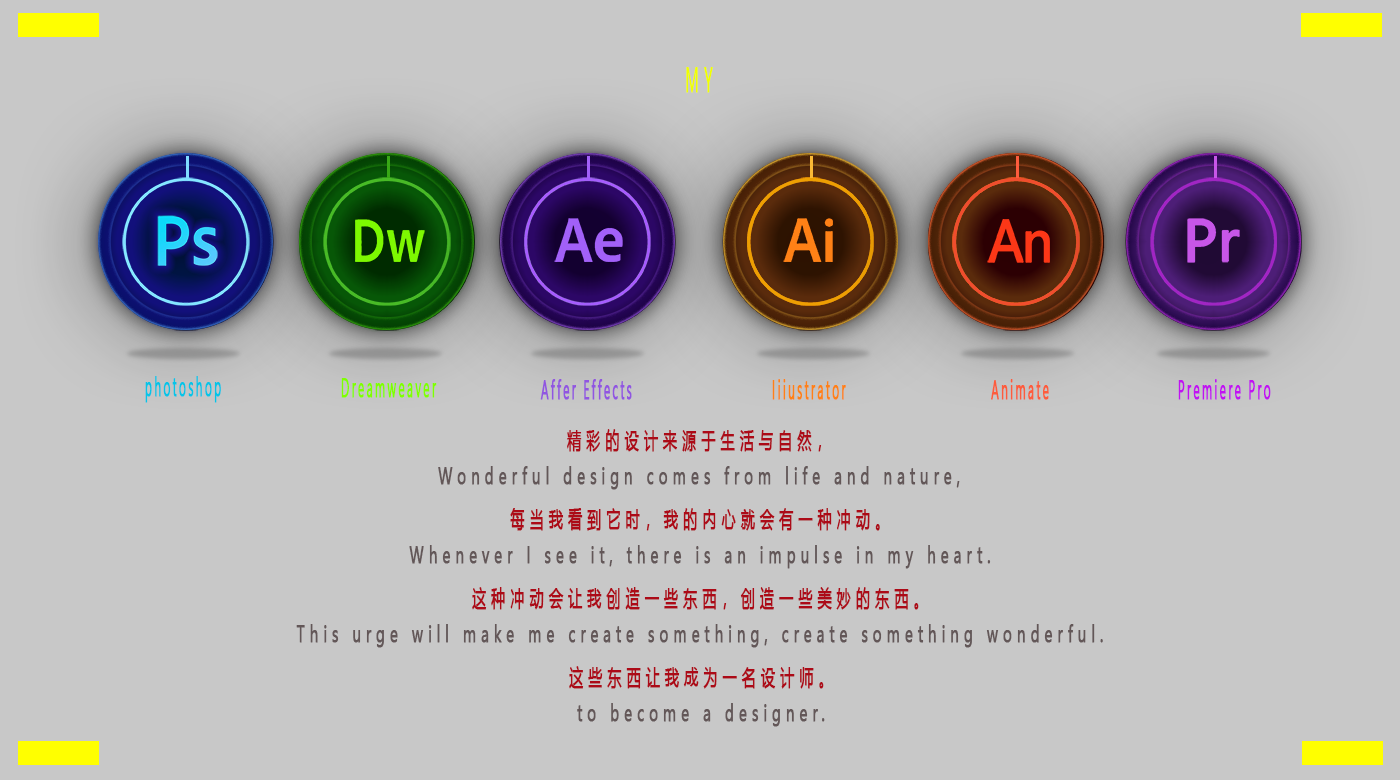
<style>
.page{position:relative;width:1400px;height:780px;background:#c8c8c8}
.page>*{position:absolute;margin:0}
.t1{font:33.3px "MicrosoftYaHei";letter-spacing:0.3em;color:#f0ff00;font-weight:bold;scale:0.43 1}
.t2{font:25px "MicrosoftJhengHeiRegular";letter-spacing:0.2em;color:#07c4e7;font-weight:bold;scale:0.43 1}
.t3{font:25px "MicrosoftJhengHeiRegular";letter-spacing:0.2em;color:#80ff00;font-weight:bold;scale:0.43 1}
.t4{font:25px "MicrosoftJhengHeiRegular";letter-spacing:0.2em;color:#9155e1;font-weight:bold;scale:0.43 1}
.t5{font:25px "MicrosoftJhengHeiRegular";letter-spacing:0.2em;color:#ff8116;font-weight:bold;scale:0.43 1}
.t6{font:25px "MicrosoftJhengHeiRegular";letter-spacing:0.2em;color:#fd5c3d;font-weight:bold;scale:0.43 1}
.t7{font:25px "MicrosoftJhengHeiRegular";letter-spacing:0.2em;color:#c113f1;font-weight:bold;scale:0.43 1}
.t8{font:22px "MicrosoftYaHei";letter-spacing:0.3em;color:#ac0a17;font-weight:bold;scale:0.66 1}
.t9{font:22px "MicrosoftYaHei";letter-spacing:0.3em;color:#635758;font-weight:bold;scale:0.66 1}
</style>
<div class="page">
<p class="t1" style="left:686px;top:67px;width:27px;height:26px">MY</p>
<p class="t2" style="left:145px;top:376px;width:76px;height:27px">photoshop</p>
<p class="t3" style="left:341px;top:378px;width:96px;height:20px">Dreamweaver</p>
<p class="t4" style="left:540px;top:379px;width:92px;height:21px">Affer Effects</p>
<p class="t5" style="left:772px;top:379px;width:74px;height:21px">Iiiustrator</p>
<p class="t6" style="left:991px;top:379px;width:58px;height:21px">Animate</p>
<p class="t7" style="left:1178px;top:379px;width:93px;height:21px">Premiere Pro</p>
<p class="t8" style="left:567px;top:429px;width:255px;height:23px">精彩的设计来源于生活与自然，</p>
<p class="t9" style="left:438px;top:466px;width:522px;height:24px">Wonderful design comes from life and nature,</p>
<p class="t8" style="left:510px;top:508px;width:370px;height:23px">每当我看到它时，我的内心就会有一种冲动。</p>
<p class="t9" style="left:409px;top:545px;width:582px;height:24px">Whenever I see it, there is an impulse in my heart.</p>
<p class="t8" style="left:472px;top:587px;width:447px;height:23px">这种冲动会让我创造一些东西，创造一些美妙的东西。</p>
<p class="t9" style="left:296px;top:624px;width:807px;height:24px">This urge will make me create something, create something wonderful.</p>
<p class="t8" style="left:569px;top:666px;width:255px;height:23px">这些东西让我成为一名设计师。</p>
<p class="t9" style="left:577px;top:703px;width:248px;height:24px">to become a designer.</p>
</div>
